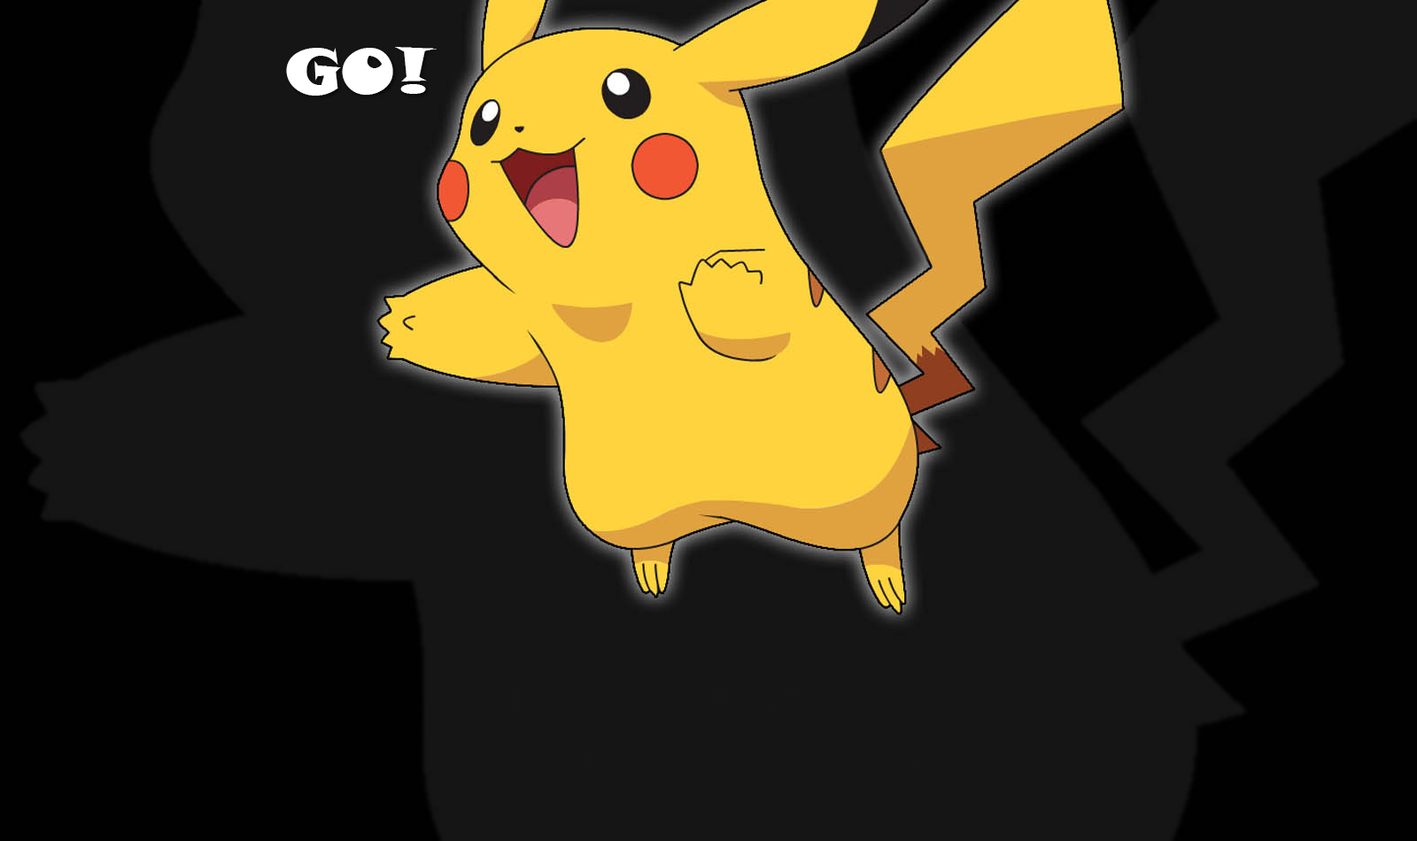
<style>
.page{position:relative;width:1417px;height:841px;background:#151515}
.page>*{position:absolute;margin:0}
.t1{font:63.8px "SnapITC-Regular";color:#ffffff}
</style>
<div class="page">
<p class="t1" style="left:286px;top:47px;width:151px;height:49px">GO!</p>
</div>
